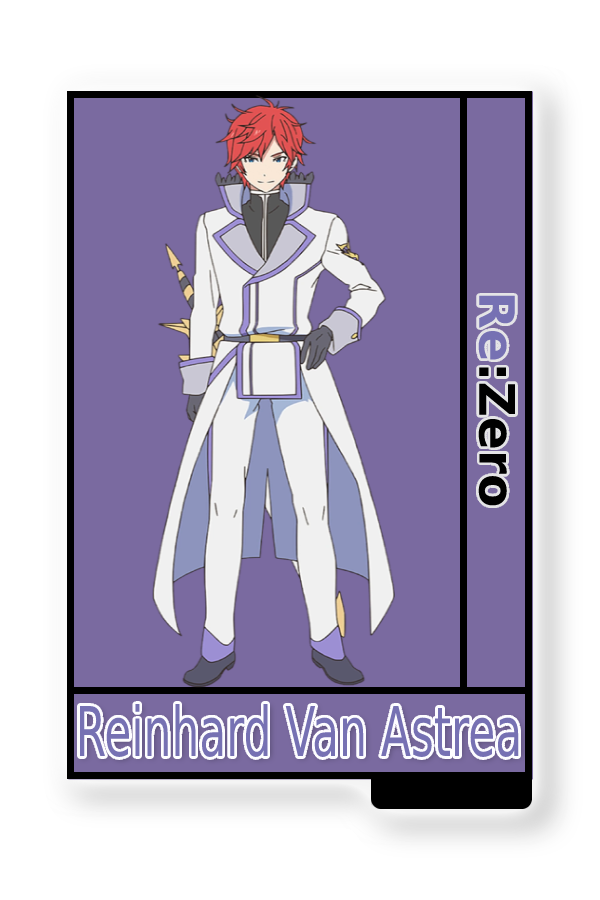
<style>
.page{position:relative;width:600px;height:900px;background:#7a6aa0}
.page>*{position:absolute;margin:0}
.t1{font:48.8px "MADETOMMY-Bold";color:#000000}
.t2{font:48.8px "MADETOMMY-Bold";color:#7671b3}
.t3{font:68.5px "CoolveticaRg-Regular";color:#7671b3;scale:0.64 1}
</style>
<div class="page">
<p class="t1" style="left:478px;top:295px;width:37px;height:211px;rotate:90deg"><span class="t2">Re</span>:Zero</p>
<p class="t3" style="left:80px;top:704px;width:439px;height:53px">Reinhard Van Astrea</p>
</div>
